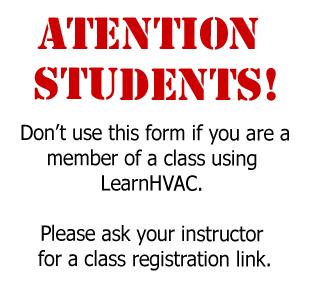
<style>
.page{position:relative;width:310px;height:300px;background:#ffffff}
.page>*{position:absolute;margin:0}
.t1{font:42px "StencilStd";color:#cc0000}
.t2{font:21px "Tahoma";color:#000000;scale:0.94 1}
</style>
<div class="page">
<p class="t1" style="left:34px;top:17px;width:242px;height:84px;text-align:center">Atention <br>Students!</p>
<p class="t2" style="left:21px;top:124px;width:268px;height:147px;text-align:center">Don’t use this form if you are a<br>member of a class using <br>LearnHVAC. <br><br>Please ask your instructor <br>for a class registration link.</p>
</div>
